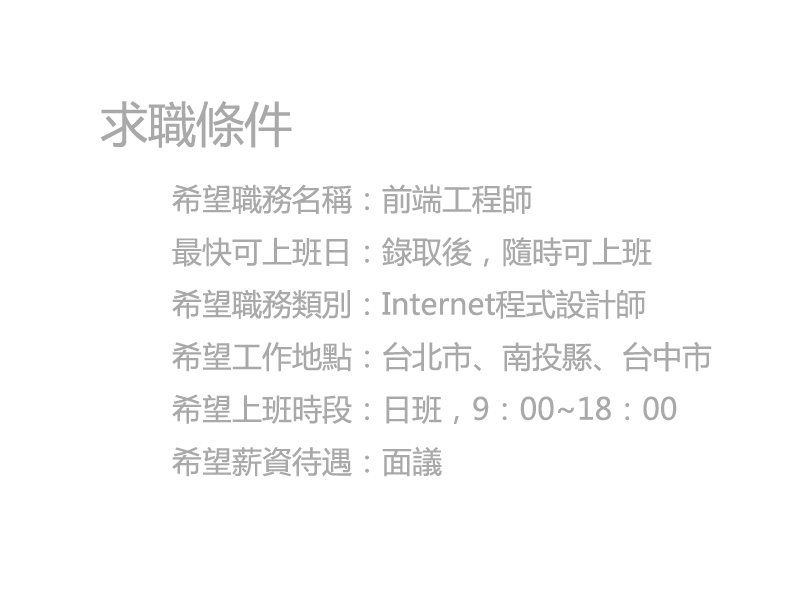
<style>
.page{position:relative;width:800px;height:600px;background:#ffffff}
.page>*{position:absolute;margin:0}
.t1{font:30px "MicrosoftYaHei";color:#a9a9a9}
.t2{font:48px "MicrosoftYaHei";color:#a9a9a9}
</style>
<div class="page">
<p class="t1" style="left:100px;top:101px;width:612px;height:376px"><span class="t2">求職條件<br></span>  希望職務名稱：前端工程師<br>  最快可上班日：錄取後，隨時可上班<br>  希望職務類別：Internet程式設計師<br>  希望工作地點：台北市、南投縣、台中市<br>  希望上班時段：日班，9：00~18：00<br>  希望薪資待遇：面議</p>
</div>
